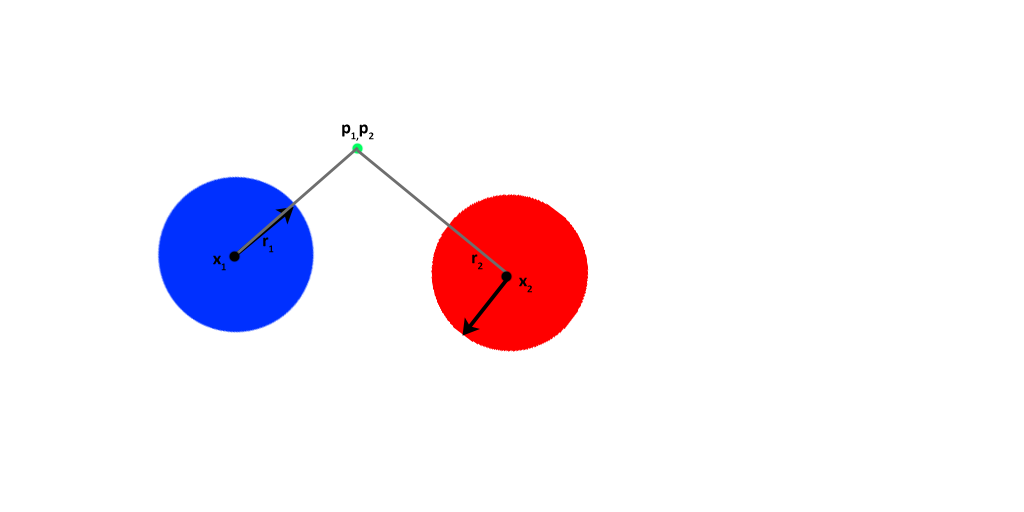
<style>
.page{position:relative;width:1024px;height:512px;background:#ffffff}
.page>*{position:absolute;margin:0}
.t1{font:18px "Calibri-Bold";color:#000000}
</style>
<div class="page">
<p class="t1" style="left:342px;top:124px;width:32px;height:17px">p1,p2</p>
<p class="t1" style="left:263px;top:237px;width:11px;height:16px">r1</p>
<p class="t1" style="left:213px;top:255px;width:13px;height:16px">x1</p>
<p class="t1" style="left:472px;top:254px;width:11px;height:16px">r2</p>
<p class="t1" style="left:519px;top:277px;width:13px;height:16px">x2</p>
</div>
